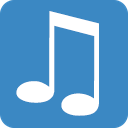
<style>
.page{position:relative;width:128px;height:128px;background:#3b88c3}
.page>*{position:absolute;margin:0}
.t1{font:196.7px "AppleSymbols";color:#ffffff}
</style>
<div class="page">
<p class="t1" style="left:16px;top:11px;width:83px;height:105px">♫</p>
</div>
